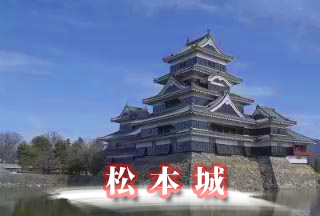
<style>
.page{position:relative;width:320px;height:216px}
.page>*{position:absolute;margin:0}
.t1{font:30px "KozMinPr6N-Heavy";letter-spacing:0.48em;color:#ffffff}
</style>
<div class="page">
<p class="t1" style="left:106px;top:166px;width:118px;height:29px">松本城</p>
</div>
